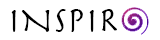
<style>
.page{position:relative;width:160px;height:40px;background:#ffffff}
.page>*{position:absolute;margin:0}
.t1{font:36px "Herculanum";color:#000000}
</style>
<div class="page">
<p class="t1" style="left:11px;top:9px;width:106px;height:23px">INSPIR</p>
</div>
